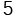
<style>
.page{position:relative;width:16px;height:16px;background:#ffffff}
.page>*{position:absolute;margin:0}
.t1{font:20px "DengXian";color:#000000}
</style>
<div class="page">
<p class="t1" style="left:3px;top:1px;width:10px;height:14px">5</p>
</div>
